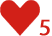
<style>
.page{position:relative;width:52px;height:36px;background:#d22018}
.page>*{position:absolute;margin:0}
.t1{font:23.4px "MyriadPro-Regular";letter-spacing:-0.1em;color:#d22018;font-weight:bold}
</style>
<div class="page">
<p class="t1" style="left:39px;top:19px;width:11px;height:17px">5</p>
</div>
